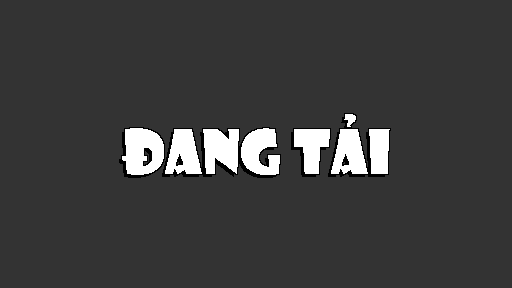
<style>
.page{position:relative;width:512px;height:288px;background:#333333}
.page>*{position:absolute;margin:0}
.t1{font:60px "UTM-Showcard";color:#ffffff}
</style>
<div class="page">
<p class="t1" style="left:122px;top:114px;width:268px;height:61px">Đang tải</p>
</div>
